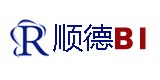
<style>
.page{position:relative;width:160px;height:80px;background:#ffffff}
.page>*{position:absolute;margin:0}
.t1{font:30px "MicrosoftYaHei";color:#03107d}
</style>
<div class="page">
<p class="t1" style="left:53px;top:24px;width:60px;height:28px">顺德</p>
</div>
